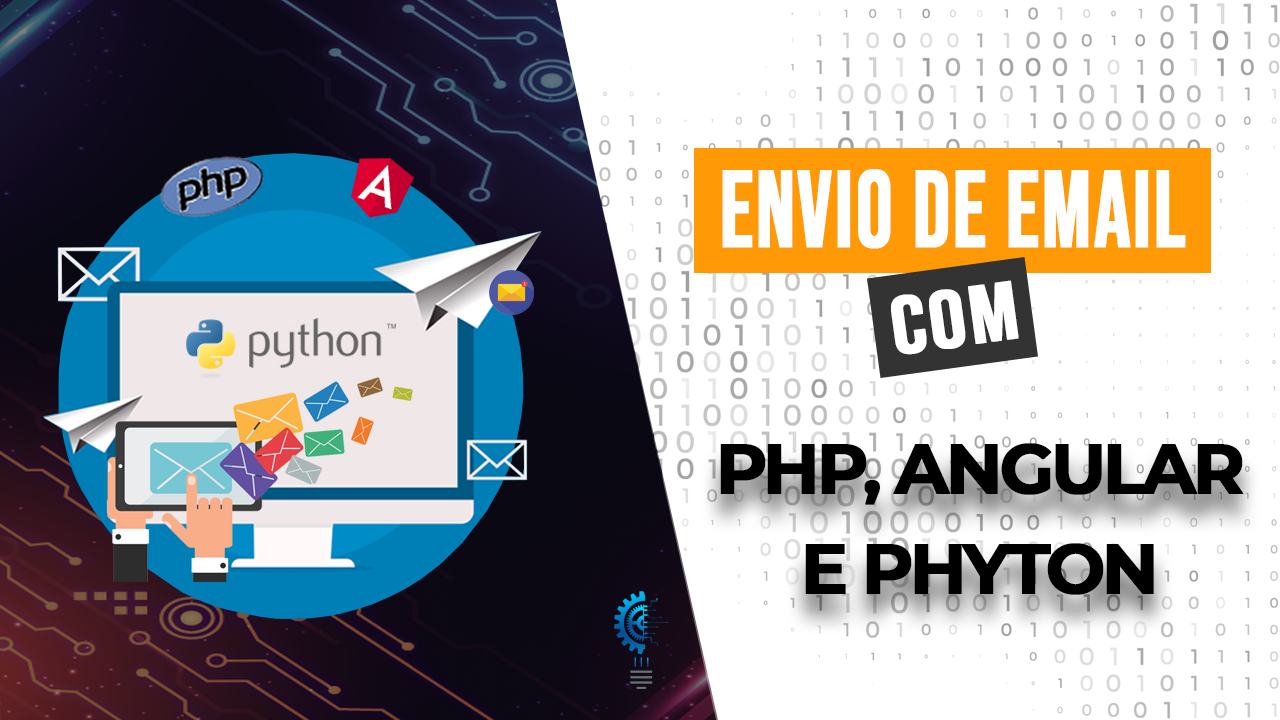
<style>
.page{position:relative;width:1280px;height:720px;background:#ffffff}
.page>*{position:absolute;margin:0}
.t1{font:108px "BebasNeue-Regular";letter-spacing:0.01em;color:#ffffff;font-weight:bold;scale:0.83 1}
.t2{font:81px "BebasNeue-Regular";letter-spacing:0.02em;color:#ffffff;font-weight:bold;scale:1.11 1}
.t3{font:70px/100px "Montserrat-Bold";letter-spacing:-0.07em;color:#000000;font-weight:bold}
</style>
<div class="page">
<p class="t1" style="left:722px;top:169px;width:464px;height:80px">ENVIO DE EMAIL</p>
<p class="t2" style="left:891px;top:280px;width:128px;height:75px;rotate:-8deg">COM</p>
<p class="t3" style="left:720px;top:443px;width:524px;height:152px;text-align:center">PHP, ANGULAR<br>E PHYTON</p>
</div>
